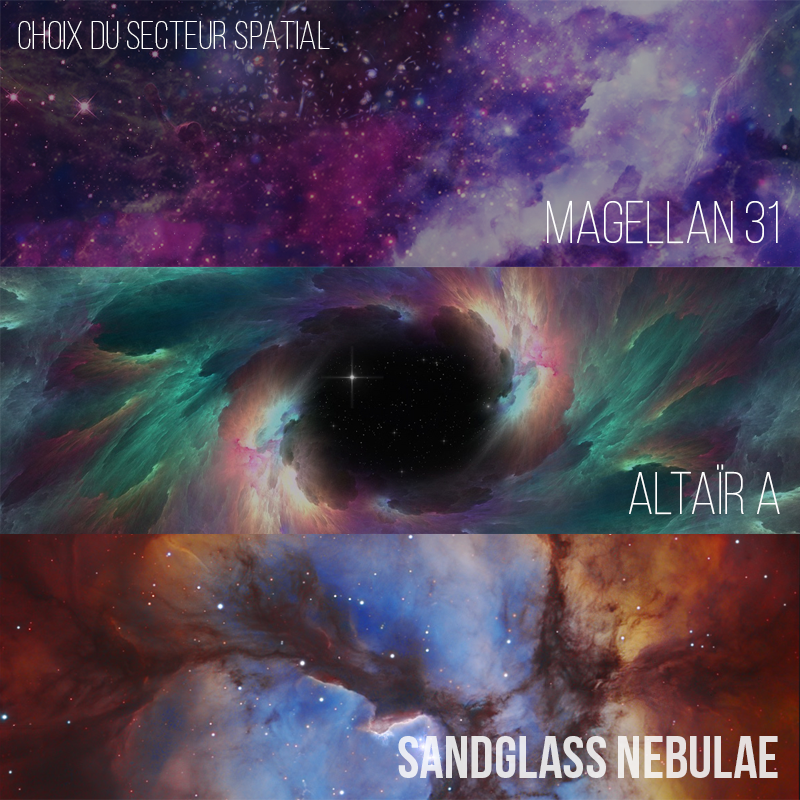
<style>
.page{position:relative;width:800px;height:800px}
.page>*{position:absolute;margin:0}
.t1{font:40px "BebasNeueLight";color:#fefefe}
.t2{font:60px "BebasNeueLight";color:#fefefe}
.t3{font:60px "BebasNeue";color:#e5e2e3}
</style>
<div class="page">
<p class="t1" style="left:18px;top:21px;width:312px;height:28px">CHOIX DU SECTEUR SPATIAL</p>
<p class="t2" style="left:547px;top:200px;width:231px;height:44px">MAGELLAN 31</p>
<p class="t2" style="left:629px;top:464px;width:151px;height:51px">altaïr A</p>
<p class="t3" style="left:398px;top:736px;width:380px;height:42px">sandglass nebulae</p>
</div>
